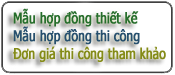
<style>
.page{position:relative;width:175px;height:75px;background:#ffffff}
.page>*{position:absolute;margin:0}
.t1{font:14.8px "Tahoma";color:#848b18;font-weight:bold;scale:0.79 1}
.t2{font:14.8px "Tahoma";color:#276e2c;font-weight:bold;scale:0.79 1}
.t3{font:14.8px "Tahoma";color:#27506e;font-weight:bold;scale:0.79 1}
</style>
<div class="page">
<p class="t1" style="left:13px;top:8px;width:153px;height:54px"><span class="t2">Mẫu hợp đồng thiết kế<br></span><span class="t3">Mẫu hợp đồng thi công<br></span>Đơn giá thi công tham khảo</p>
</div>
